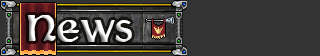
<style>
.page{position:relative;width:320px;height:56px;background:#333333}
.page>*{position:absolute;margin:0}
.t1{font:45px "Martel";color:#ffffff}
.t2{font:45px "Martel";color:#fffefe}
</style>
<div class="page">
<p class="t1" style="left:27px;top:15px;width:29px;height:26px">N</p>
<p class="t2" style="left:57px;top:20px;width:75px;height:22px">ews</p>
</div>
